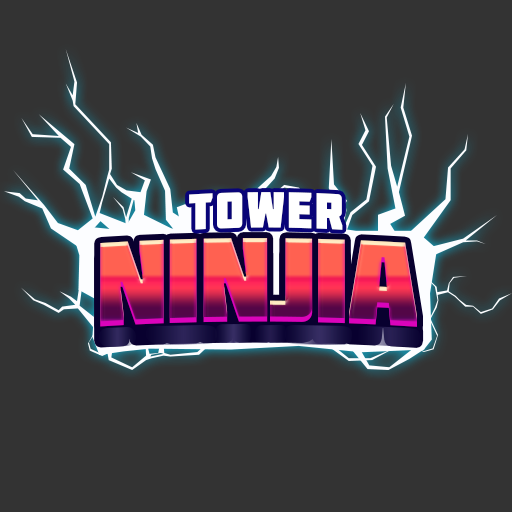
<style>
.page{position:relative;width:512px;height:512px;background:#333333}
.page>*{position:absolute;margin:0}
.t1{font:50px "Molot";letter-spacing:0.05em;color:#ffffff;scale:0.96 1}
.t2{font:119.7px "Molot";letter-spacing:-0.025em}
</style>
<div class="page">
<p class="t1" style="left:189px;top:192px;width:154px;height:38px">TOWER</p>
<p class="t2" style="left:100px;top:238px;width:317px;height:89px">ninjia</p>
</div>
